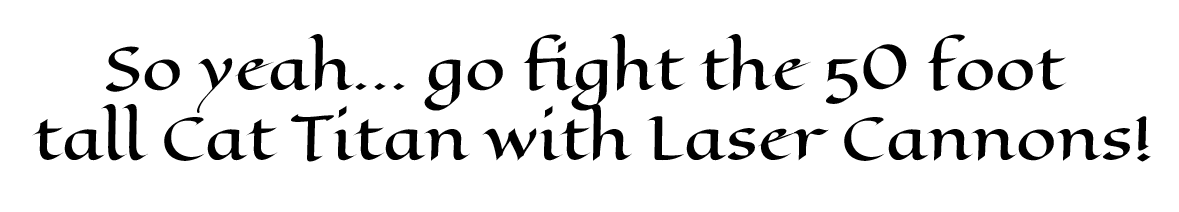
<style>
.page{position:relative;width:1179px;height:212px;background:#ffffff}
.page>*{position:absolute;margin:0}
.t1{font:58.3px "EagleLake-Regular";color:#000000}
</style>
<div class="page">
<p class="t1" style="left:32px;top:34px;width:1119px;height:128px;text-align:center">So yeah... go fight the 50 foot <br>tall Cat Titan with Laser Cannons!</p>
</div>
